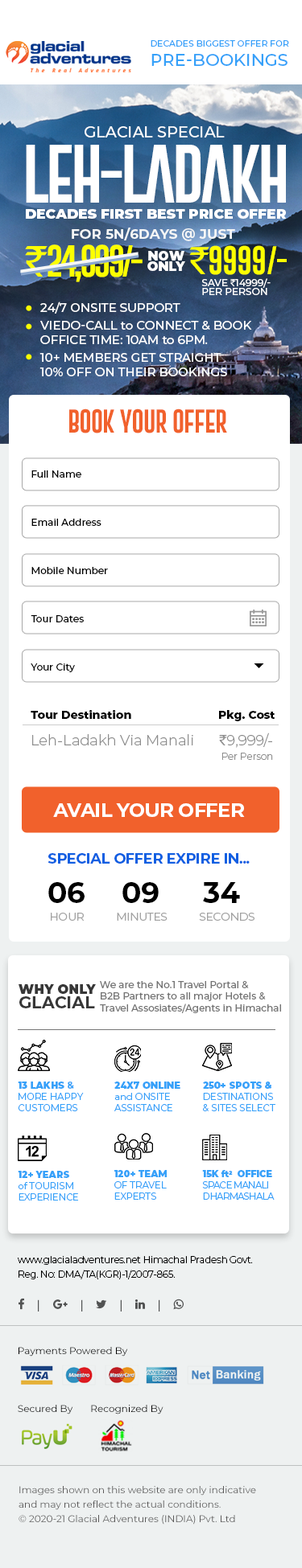
<style>
.page{position:relative;width:302px;height:1568px;background:#ffffff}
.page>*{position:absolute;margin:0}
.t1{font:8.6px/19.3px "Montserrat-Medium";color:#36a1f9;text-transform:uppercase}
.t2{font:16.7px/19.3px "Montserrat-Medium";color:#36a1f9;text-transform:uppercase}
.t3{font:15.4px "Montserrat-Medium";color:#ffffff;text-transform:uppercase}
.t4{font:60.5px "GoboldExtra1";letter-spacing:-0.05em;color:#ffffff;text-transform:uppercase}
.t5{font:13.7px "Montserrat-Black";color:#ffffff;text-transform:uppercase}
.t6{font:13.7px "Montserrat-Bold";color:#f5f6f6;text-transform:uppercase}
.t7{font:32.7px "GoboldExtra1";letter-spacing:-0.1em;color:#fcff00;text-transform:uppercase}
.t8{font:41.8px "RupeeForadian";letter-spacing:-0.025em;color:#fcff00;text-transform:uppercase}
.t9{font:29.1px "GoboldExtra1";letter-spacing:-0.025em;color:#fcff00;text-transform:uppercase}
.t10{font:37.2px "RupeeForadian";letter-spacing:-0.025em;color:#fcff00;text-transform:uppercase}
.t11{font:12.7px/10.5px "Montserrat-Black";color:#ffffff;text-transform:uppercase}
.t12{font:9.6px/9.2px "Montserrat-Medium";color:#ffffff;text-transform:uppercase}
.t13{font:9.6px/9.2px "RupeeForadian";color:#ffffff;text-transform:uppercase}
.t14{font:12px "Montserrat-Medium";color:#ffffff;text-transform:uppercase}
.t15{font:12px "Montserrat-Medium";color:#ffffff}
.t16{font:24.1px "GoboldExtra1";letter-spacing:-0.025em;color:#f1612c;text-transform:uppercase}
.t17{font:9.6px/16.1px "Montserrat-Medium";color:#000000}
.t18{font:11.3px "Montserrat-ExtraBold";color:#000000}
.t19{font:14.5px/14.5px "Montserrat-Light";color:#8d8d8d}
.t20{font:14.5px/14.5px "RupeeForadian";color:#8d8d8d}
.t21{font:9.6px/14.5px "Montserrat-Light";color:#8d8d8d}
.t22{font:19.3px "Montserrat-Bold";letter-spacing:-0.025em;color:#ffffff;text-transform:uppercase}
.t23{font:14.5px "Montserrat-Bold";letter-spacing:-0.025em;color:#105fe2;text-transform:uppercase}
.t24{font:28.9px "Montserrat-Bold";letter-spacing:-0.025em;color:#000000;text-transform:uppercase}
.t25{font:11.3px "Montserrat-Regular";letter-spacing:-0.025em;color:#a3a3a3;text-transform:uppercase}
.t26{font:13px/14.3px "Montserrat-Black";color:#373737;text-transform:uppercase}
.t27{font:16.7px/14.3px "Montserrat-Bold";color:#373737;text-transform:uppercase}
.t28{font:9.6px "Montserrat-Medium";color:#737373}
.t29{font:9.3px "Montserrat-Regular";color:#36a1f9;text-transform:uppercase}
.t30{font:9.3px "Montserrat-Black";color:#36a1f9;text-transform:uppercase}
.t31{font:9.3px "Montserrat-Bold";color:#36a1f9}
.t32{font:9.3px "Montserrat-Regular";color:#36a1f9}
.t33{font:9.3px "Montserrat-Regular";letter-spacing:-0.05em;color:#36a1f9;text-transform:uppercase}
.t34{font:9.3px "Montserrat-Black";letter-spacing:-0.025em;color:#36a1f9}
.t35{font:9.3px "Montserrat-Black";letter-spacing:-0.025em;color:#36a1f9;text-transform:uppercase}
.t36{font:9.6px/14.5px "Montserrat-Light";letter-spacing:-0.025em;color:#000000}
.t37{font:9.6px/9.6px "Montserrat-Regular";color:#000000}
.t38{font:9.6px/14.5px "Montserrat-Regular";color:#5b5a5a}
</style>
<div class="page">
<p class="t1" style="left:150px;top:40px;width:139px;height:26px">decades biggest offer for<br><span class="t2">Pre-BookingS</span></p>
<p class="t3" style="left:84px;top:126px;width:140px;height:12px">Glacial Special</p>
<p class="t4" style="left:26px;top:145px;width:259px;height:58px">leh-ladakh</p>
<p class="t5" style="left:26px;top:209px;width:260px;height:10px">decades first best price offer</p>
<p class="t6" style="left:72px;top:228px;width:163px;height:13px">for 5N/6Days @ just</p>
<p class="t7" style="left:25px;top:244px;width:117px;height:38px"><span class="t8">`</span>24,999/-</p>
<p class="t9" style="left:189px;top:245px;width:97px;height:30px"><span class="t10">`</span>9999/-</p>
<p class="t11" style="left:147px;top:251px;width:38px;height:20px;text-align:center">Now<br>only</p>
<p class="t12" style="left:201px;top:278px;width:69px;height:17px">save <span class="t13">`</span>14999/-<br>Per person</p>
<p class="t14" style="left:39px;top:302px;width:213px;height:74px">24/7 onsite support<br>Viedo-call <span class="t15">to</span> Connect <span class="t15">&amp;</span> book<br>Office time: 10am <span class="t15">to</span> 6PM.<br>10+ members get Straight  <br>10% Off on their Bookings</p>
<p class="t16" style="left:69px;top:408px;width:158px;height:25px">Book your offer</p>
<p class="t17" style="left:31px;top:470px;width:77px;height:202px">Full Name<br><br><br>Email Address<br><br><br>Mobile Number<br><br><br>Tour Dates<br><br><br>Your City</p>
<p class="t18" style="left:31px;top:710px;width:244px;height:11px">Tour Destination       Pkg. Cost</p>
<p class="t19" style="left:32px;top:733px;width:241px;height:27px;text-align:right">Leh-Ladakh Via Manali     <span class="t20">`</span>9,999/-<br><span class="t21">Per Person</span></p>
<p class="t22" style="left:53px;top:803px;width:191px;height:14px">Avail your Offer</p>
<p class="t23" style="left:47px;top:853px;width:202px;height:11px">Special Offer Expire In...</p>
<p class="t24" style="left:48px;top:882px;width:192px;height:21px">06     09      34</p>
<p class="t25" style="left:51px;top:913px;width:203px;height:8px">HOUR            MINUTES            SECONDS</p>
<p class="t26" style="left:18px;top:984px;width:78px;height:24px">why ONLY<br><span class="t27">Glacial</span></p>
<p class="t28" style="left:100px;top:981px;width:181px;height:32px">We are the No.1 Travel Portal &amp; <br>B2B Partners to all major Hotels &amp;<br>Travel Assosiates/Agents in Himachal</p>
<p class="t29" style="left:18px;top:1082px;width:66px;height:29px"><span class="t30">13 Lakhs </span><span class="t31">&amp;<br></span>more Happy<br>Customers</p>
<p class="t29" style="left:114px;top:1082px;width:66px;height:29px"><span class="t30">24X7 Online<br></span><span class="t32">and </span>Onsite<br>Assistance</p>
<p class="t30" style="left:203px;top:1082px;width:72px;height:29px">250+ spots &amp;<br><span class="t29">Destinations<br></span><span class="t32">&amp; </span><span class="t29">sites select</span></p>
<p class="t29" style="left:114px;top:1170px;width:52px;height:30px"><span class="t30">120+ team<br></span>of Travel<br>Experts</p>
<p class="t33" style="left:202px;top:1170px;width:72px;height:30px"><span class="t34">15K ft2  </span><span class="t35">Office<br></span>Space Manali<br>Dharmashala</p>
<p class="t29" style="left:18px;top:1171px;width:60px;height:30px"><span class="t30">12+ Years<br></span><span class="t32">of </span>tourism<br>Experience</p>
<p class="t36" style="left:18px;top:1256px;width:234px;height:23px">www.glacialadventures.net Himachal Pradesh Govt.<br>Reg. No: DMA/TA(KGR)-1/2007-865.</p>
<p class="t37" style="left:18px;top:1347px;width:145px;height:67px">Payments Powered By<br><br><br><br><br><br>Secured By       Recognized By</p>
<p class="t38" style="left:18px;top:1486px;width:238px;height:39px">Images shown on this website are only indicative<br>and may not reflect the actual conditions.<br>© 2020-21 Glacial Adventures (INDIA) Pvt. Ltd</p>
</div>
